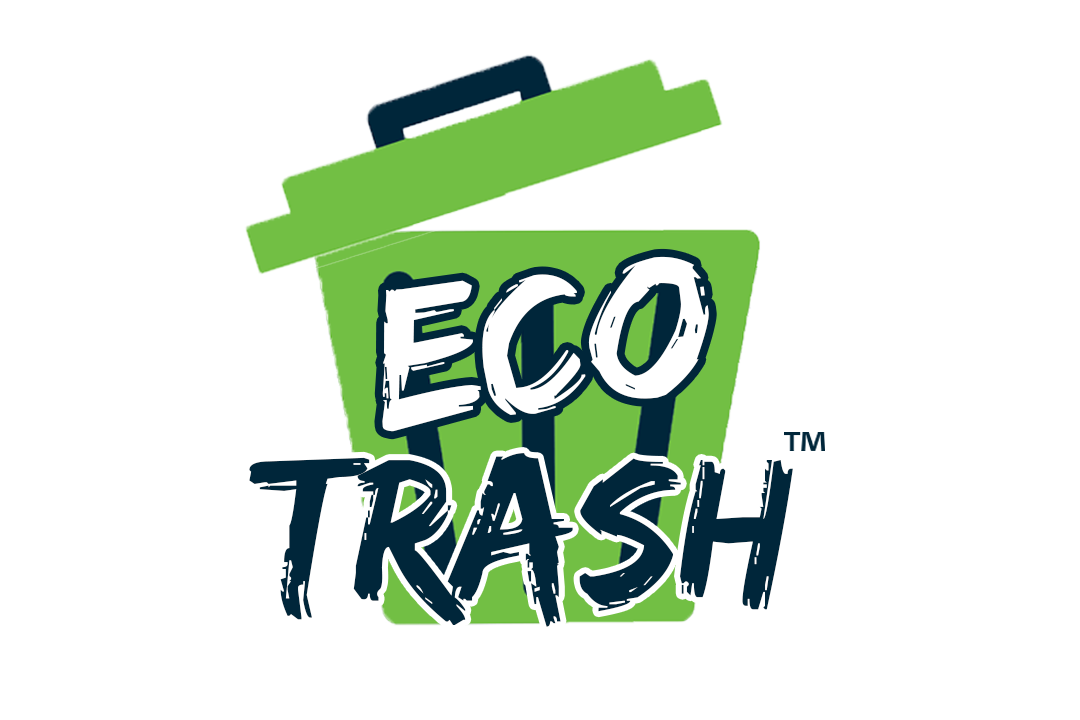
<style>
.page{position:relative;width:1080px;height:720px;background:#ffffff}
.page>*{position:absolute;margin:0}
.t1{font:210.1px "EdoSZ";color:#ffffff}
.t2{font:209px "EdoSZ";color:#00263a}
</style>
<div class="page">
<p class="t1" style="left:382px;top:256px;width:327px;height:176px;rotate:-7deg">ECO</p>
<p class="t2" style="left:249px;top:453px;width:544px;height:174px">Trash</p>
</div>
